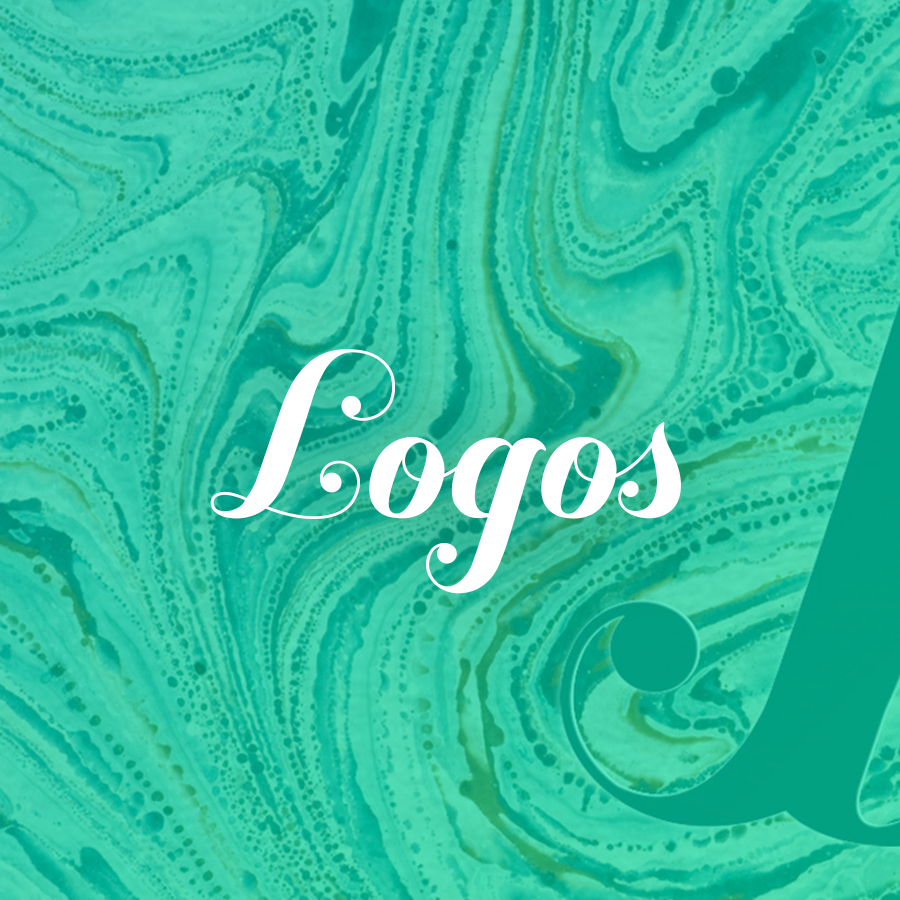
<style>
.page{position:relative;width:900px;height:900px}
.page>*{position:absolute;margin:0}
.t1{font:235px "Buttermilk";color:#ffffff}
</style>
<div class="page">
<p class="t1" style="left:210px;top:349px;width:471px;height:245px">Logos</p>
</div>
